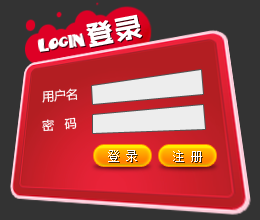
<style>
.page{position:relative;width:260px;height:220px;background:#333333}
.page>*{position:absolute;margin:0}
.t1{font:28px "ZHSRXT--GBK1-0";color:#ffffff;font-weight:bold}
.t2{font:12px "MicrosoftYaHei";color:#ffffff}
.t3{font:12px "SimSun";color:#ffffff}
</style>
<div class="page">
<p class="t1" style="left:86px;top:14px;width:56px;height:34px;rotate:-11deg">登录</p>
<p class="t2" style="left:42px;top:88px;width:36px;height:15px;rotate:-5deg">用户名</p>
<p class="t2" style="left:42px;top:117px;width:35px;height:15px;rotate:-4deg">密   码</p>
<p class="t3" style="left:108px;top:150px;width:29px;height:12px">登 录</p>
<p class="t3" style="left:173px;top:150px;width:29px;height:12px">注 册</p>
</div>
